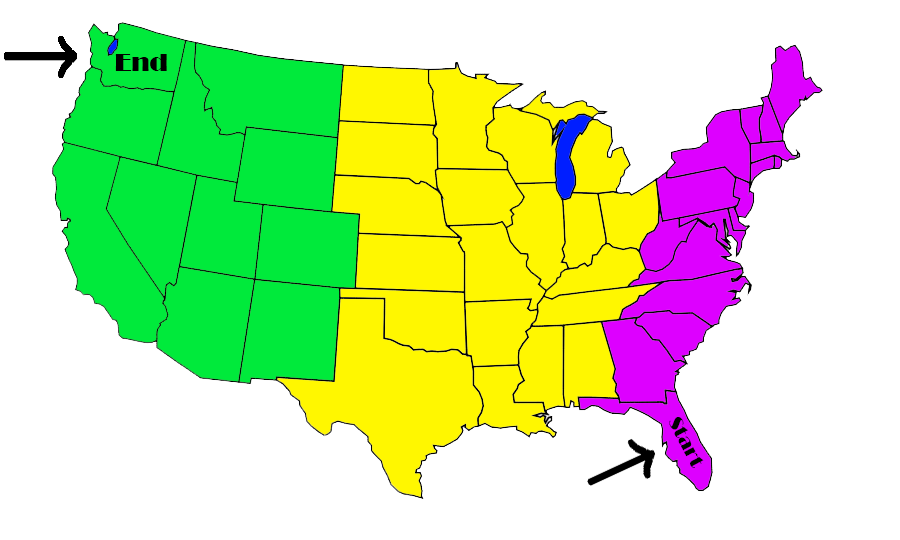
<style>
.page{position:relative;width:900px;height:540px;background:#ffffff}
.page>*{position:absolute;margin:0}
.t1{font:24.7px "Broadway";color:#000000}
.t2{font:19.5px "Broadway";color:#000000}
</style>
<div class="page">
<p class="t1" style="left:115px;top:54px;width:52px;height:17px">End</p>
<p class="t2" style="left:669px;top:417px;width:35px;height:51px;rotate:62deg">Start</p>
</div>
